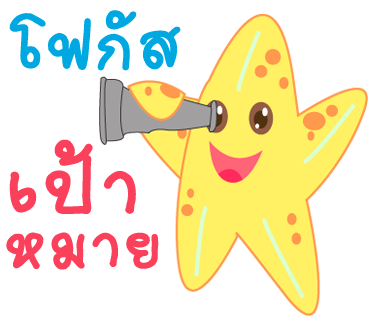
<style>
.page{position:relative;width:370px;height:320px;background:#ffffff}
.page>*{position:absolute;margin:0}
.t1{font:103px "2005_iannnnnMTV";letter-spacing:0.025em;color:#00a8e1;scale:1.06 1}
.t2{font:125px "2005_iannnnnMTV";letter-spacing:0.025em;color:#fa405a;scale:1.06 1}
.t3{font:100px "2005_iannnnnMTV";letter-spacing:0.025em;color:#fa405a;scale:1.06 1}
</style>
<div class="page">
<p class="t1" style="left:9px;top:10px;width:172px;height:61px">โฟกัส</p>
<p class="t2" style="left:9px;top:139px;width:127px;height:75px">เป้า</p>
<p class="t3" style="left:6px;top:232px;width:153px;height:38px">หมาย</p>
</div>
